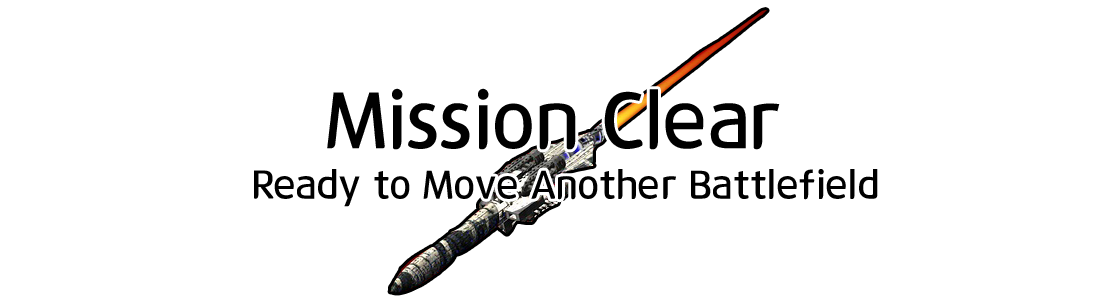
<style>
.page{position:relative;width:1100px;height:300px;background:#ffffff}
.page>*{position:absolute;margin:0}
.t1{font:80px "12LotteMartDreamBold";color:#000000}
.t2{font:40px "12LotteMartDreamBold";color:#000000}
</style>
<div class="page">
<p class="t1" style="left:327px;top:88px;width:453px;height:62px">Mission Clear</p>
<p class="t2" style="left:254px;top:169px;width:624px;height:38px">Ready to Move Another Battlefield</p>
</div>
